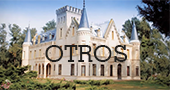
<style>
.page{position:relative;width:170px;height:90px}
.page>*{position:absolute;margin:0}
.t1{font:24px "GeometricSlab703BT-Medium";color:#1e1d1b}
</style>
<div class="page">
<p class="t1" style="left:45px;top:45px;width:83px;height:17px">OTROS</p>
</div>
